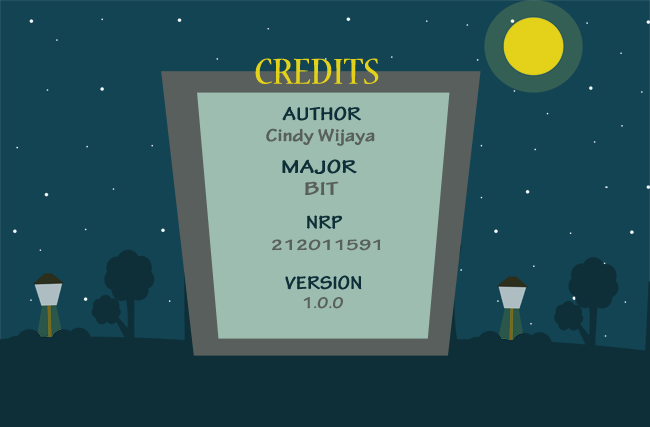
<style>
.page{position:relative;width:650px;height:427px;background:#134454}
.page>*{position:absolute;margin:0}
.t1{font:39.8px "NuevaStd-Cond";color:#e4d21a;scale:1.25 1}
.t2{font:19.6px "TektonPro-BoldCond";color:#0e2f38;scale:1.39 1}
.t3{font:18.6px "TektonPro-BoldCond";color:#595f5c;scale:1.43 1}
.t4{font:19.6px "TektonPro-BoldCond";color:#0e2f38;scale:1.5 1}
.t5{font:19.7px "TektonPro-BoldCond";color:#595f5c;scale:1.6 1}
.t6{font:19.6px "TektonPro-BoldCond";color:#0e2f38;scale:1.29 1}
.t7{font:15.6px "TektonPro-BoldCond";color:#595f5c;scale:1.56 1}
.t8{font:16.6px "TektonPro-BoldCond";color:#595f5c;scale:1.27 1}
</style>
<div class="page">
<p class="t1" style="left:255px;top:58px;width:124px;height:26px">CREDITS</p>
<p class="t2" style="left:282px;top:106px;width:80px;height:15px">AUTHOR</p>
<p class="t3" style="left:266px;top:128px;width:109px;height:18px">Cindy Wijaya</p>
<p class="t4" style="left:282px;top:159px;width:75px;height:15px">MAJOR</p>
<p class="t5" style="left:305px;top:181px;width:34px;height:14px">BIT</p>
<p class="t6" style="left:307px;top:215px;width:35px;height:14px">NRP</p>
<p class="t7" style="left:272px;top:239px;width:109px;height:12px">212011591</p>
<p class="t6" style="left:285px;top:275px;width:77px;height:15px">VERSION</p>
<p class="t8" style="left:303px;top:297px;width:40px;height:12px">1.0.0</p>
</div>
